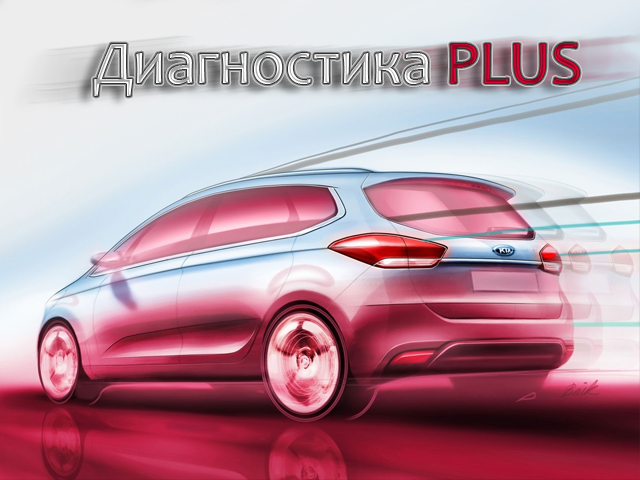
<style>
.page{position:relative;width:640px;height:480px}
.page>*{position:absolute;margin:0}
.t1{font:61.9px "Candara"}
</style>
<div class="page">
<p class="t1" style="left:94px;top:43px;width:486px;height:53px">Диагностика PLUS</p>
</div>
